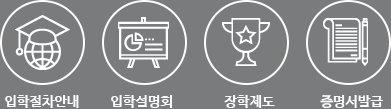
<style>
.page{position:relative;width:391px;height:109px;background:#7a7b7d}
.page>*{position:absolute;margin:0}
.t1{font:14px "NanumBarunGothicBold";color:#ffffff}
</style>
<div class="page">
<p class="t1" style="left:5px;top:95px;width:74px;height:13px">입학절차안내</p>
<p class="t1" style="left:111px;top:95px;width:61px;height:13px">입학설명회</p>
<p class="t1" style="left:224px;top:95px;width:51px;height:13px">장학제도</p>
<p class="t1" style="left:320px;top:95px;width:63px;height:14px">증명서발급</p>
</div>
